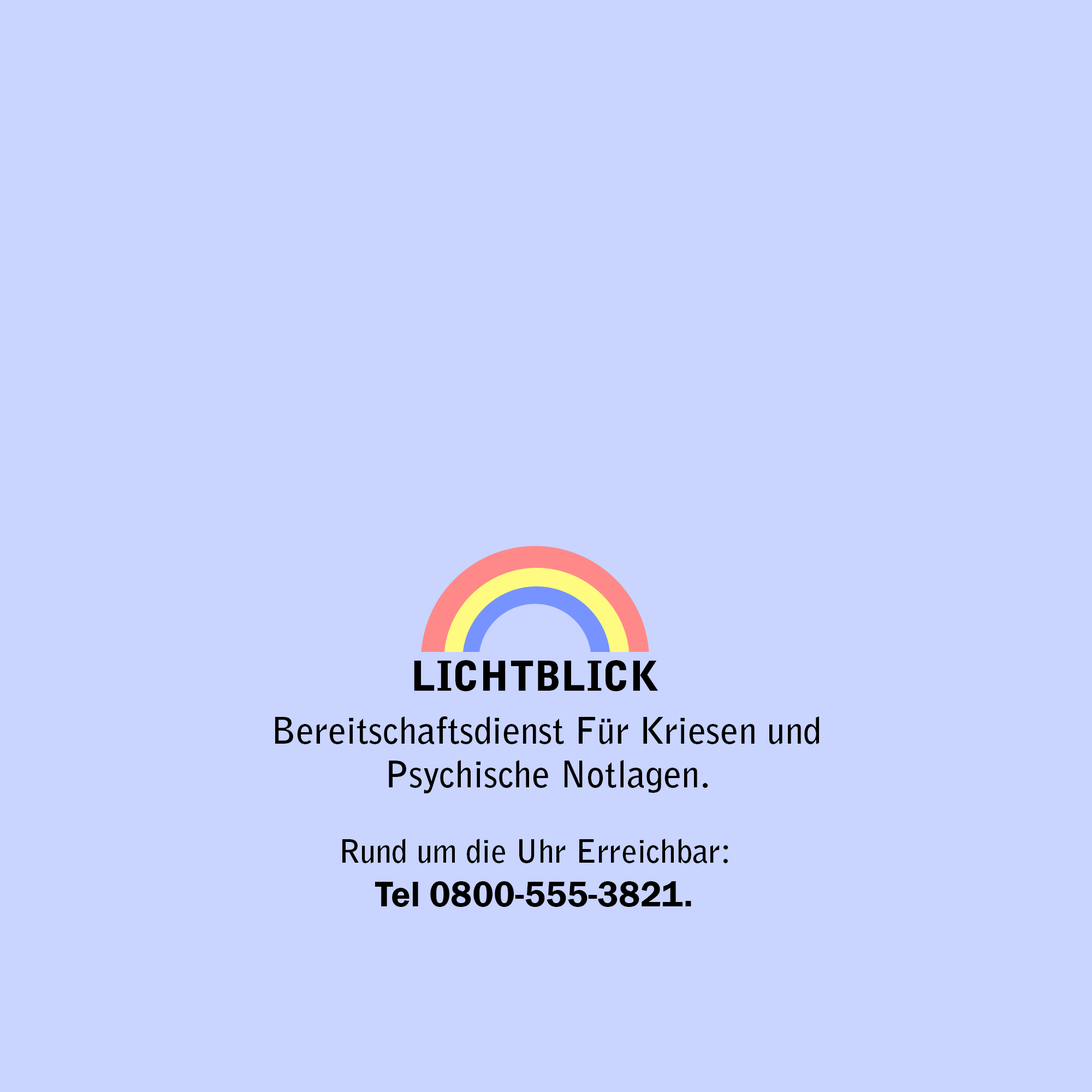
<style>
.page{position:relative;width:1092px;height:1092px;background:#c9d4ff}
.page>*{position:absolute;margin:0}
.t1{font:40.9px "BellGothicStd-Black";color:#000000}
.t2{font:36.4px "BellGothicStd-Bold";color:#000000}
.t3{font:31.8px "BellGothicStd-Bold";color:#000000}
.t4{font:36.4px "FranklinGothic-Demi";color:#000000}
</style>
<div class="page">
<p class="t1" style="left:414px;top:660px;width:244px;height:31px">LICHTBLICK</p>
<p class="t2" style="left:275px;top:716px;width:544px;height:77px;text-align:center">Bereitschaftsdienst Für Kriesen und Psychische Notlagen.</p>
<p class="t3" style="left:342px;top:839px;width:386px;height:68px;text-align:center">Rund um die Uhr Erreichbar:<br><span class="t4">Tel 0800-555-3821.</span></p>
</div>
